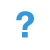
<style>
.page{position:relative;width:50px;height:50px;background:#ffffff}
.page>*{position:absolute;margin:0}
.t1{font:35.9px "HelveticaNeue-Bold";letter-spacing:-0.04em;color:#3498db}
</style>
<div class="page">
<p class="t1" style="left:16px;top:11px;width:18px;height:27px">?</p>
</div>
